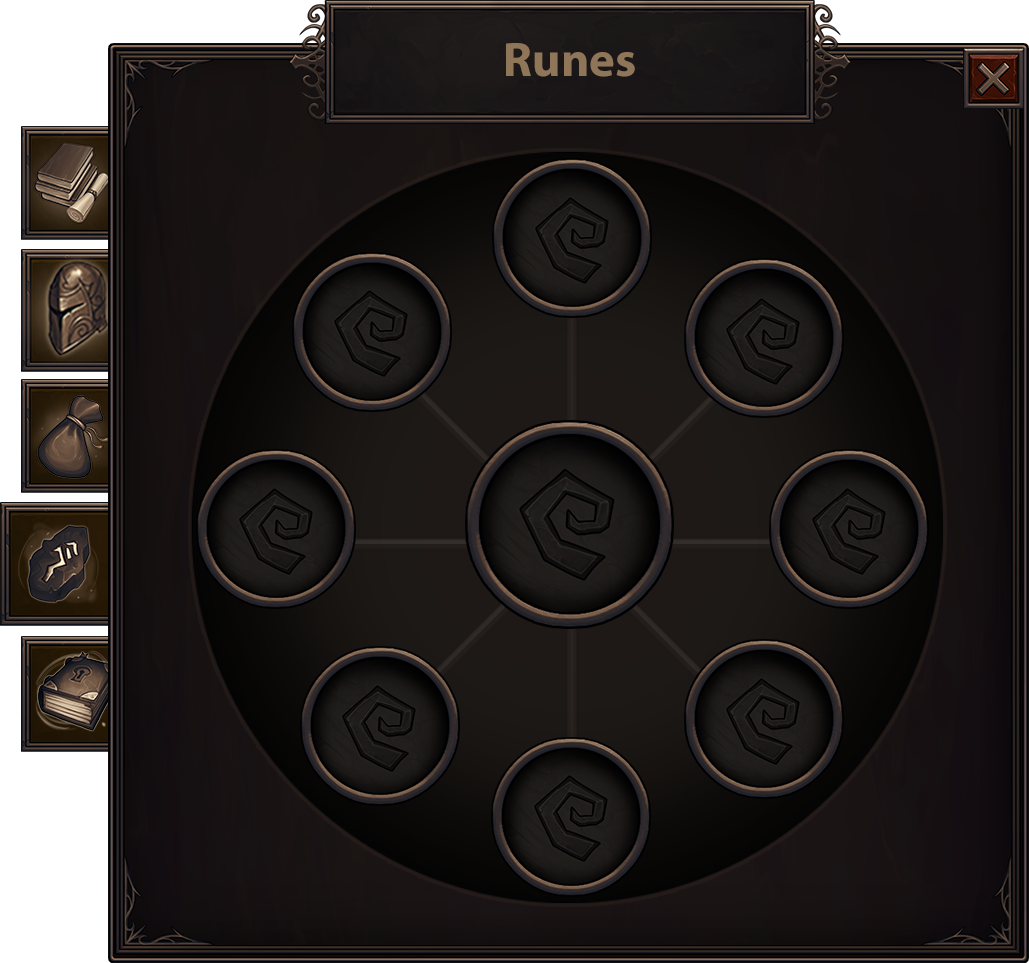
<style>
.page{position:relative;width:1029px;height:963px}
.page>*{position:absolute;margin:0}
.t1{font:48.5px "MyriadPro-Bold";color:#907659}
</style>
<div class="page">
<p class="t1" style="left:506px;top:43px;width:129px;height:34px">Runes</p>
</div>
